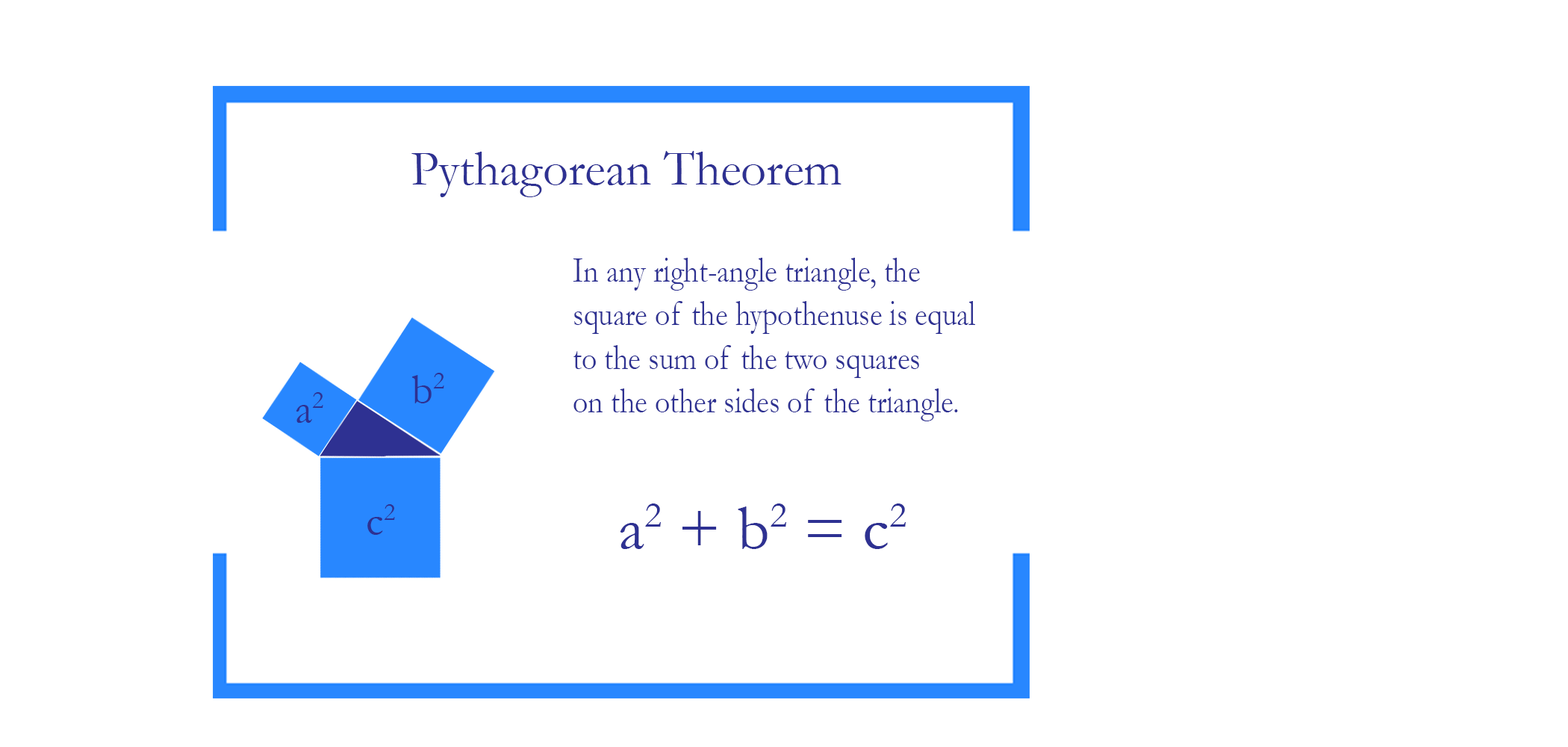
<style>
.page{position:relative;width:1568px;height:747px;background:#ffffff}
.page>*{position:absolute;margin:0}
.t1{font:49.9px "Garamond";color:#2e3192}
.t2{font:36.4px "Garamond";color:#2e3192;scale:0.82 1}
.t3{font:42.9px "Garamond";color:#2e3192}
.t4{font:64.6px "Garamond";color:#2e3192}
</style>
<div class="page">
<p class="t1" style="left:411px;top:151px;width:430px;height:46px">Pythagorean Theorem</p>
<p class="t2" style="left:573px;top:258px;width:402px;height:163px">In any right-angle triangle, the<br>square of the hypothenuse is equal<br>to the sum of the two squares <br>on the other sides of the triangle.</p>
<p class="t3" style="left:412px;top:373px;width:32px;height:30px">b2</p>
<p class="t3" style="left:296px;top:392px;width:27px;height:31px">a2</p>
<p class="t3" style="left:367px;top:504px;width:28px;height:31px">c2</p>
<p class="t4" style="left:620px;top:503px;width:286px;height:46px">a2 + b2 = c2</p>
</div>
